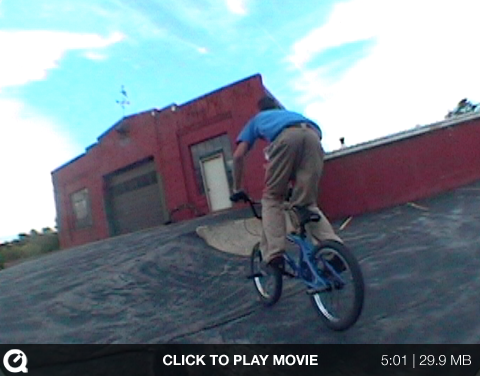
<style>
.page{position:relative;width:480px;height:376px}
.page>*{position:absolute;margin:0}
.t1{font:14px "HelveticaNeue-Bold";color:#ffffff}
.t2{font:14px "HelveticaNeue-Light";color:#ffffff}
</style>
<div class="page">
<p class="t1" style="left:163px;top:354px;width:155px;height:12px">CLICK TO PLAY MOVIE</p>
<p class="t2" style="left:381px;top:354px;width:90px;height:14px">5:01 | 29.9 MB</p>
</div>
